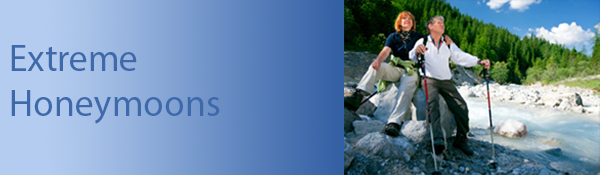
<style>
.page{position:relative;width:600px;height:175px}
.page>*{position:absolute;margin:0}
.t1{font:37.5px "MyriadPro-Regular";color:#3e6aab}
</style>
<div class="page">
<p class="t1" style="left:11px;top:45px;width:209px;height:79px">Extreme Honeymoons</p>
</div>
